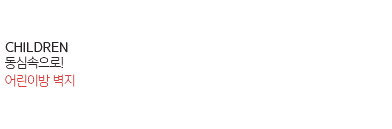
<style>
.page{position:relative;width:392px;height:129px;background:#ffffff}
.page>*{position:absolute;margin:0}
.t1{font:13px "YoonGothicPro740";color:#2a2424}
.t2{font:13px/18.6px "YoonGothicPro710";color:#d73e3e}
.t3{font:13px/18.6px "YoonGothicPro710";color:#2a2424}
</style>
<div class="page">
<p class="t1" style="left:5px;top:42px;width:63px;height:11px">CHILDREN</p>
<p class="t2" style="left:5px;top:56px;width:70px;height:31px"><span class="t3">동심속으로!<br></span>어린이방 벽지</p>
</div>
